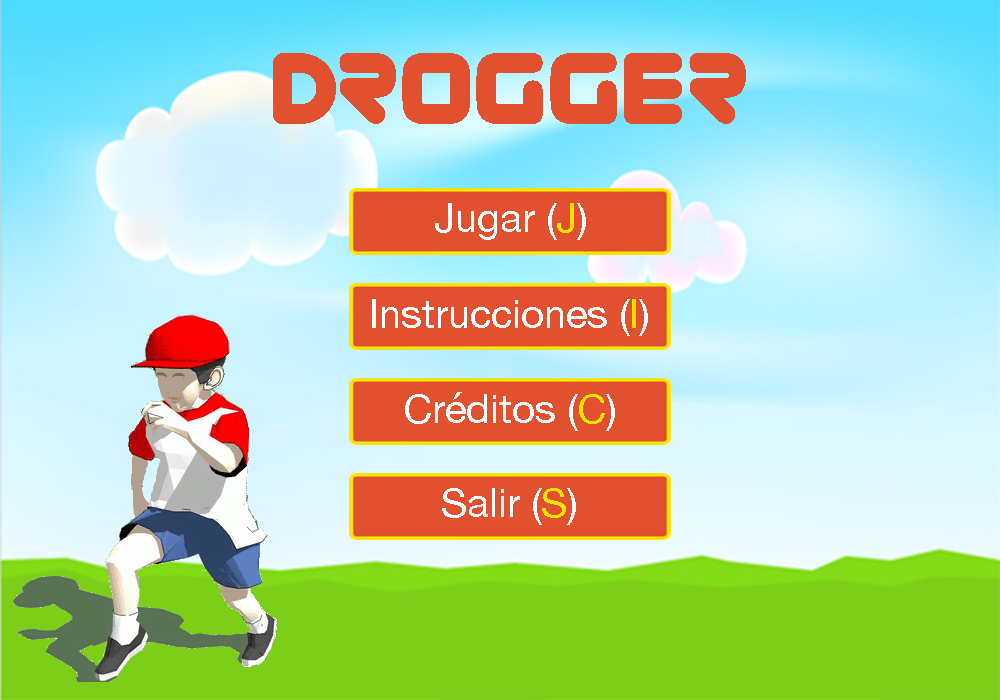
<style>
.page{position:relative;width:1000px;height:700px}
.page>*{position:absolute;margin:0}
.t1{font:100px "Zorque-Regular";color:#e15130}
.t2{font:40px "HelveticaNeue";color:#ffffff}
.t3{font:40px "HelveticaNeue";color:#ffe100}
</style>
<div class="page">
<p class="t1" style="left:273px;top:53px;width:473px;height:71px">Drogger</p>
<p class="t2" style="left:435px;top:203px;width:151px;height:37px">Jugar (<span class="t3">J</span>)</p>
<p class="t2" style="left:372px;top:299px;width:276px;height:37px">Instrucciones (<span class="t3">I</span>)</p>
<p class="t2" style="left:405px;top:392px;width:210px;height:39px">Créditos (<span class="t3">C</span>)</p>
<p class="t2" style="left:442px;top:488px;width:134px;height:37px">Salir (<span class="t3">S</span>)</p>
</div>
